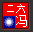
<style>
.page{position:relative;width:33px;height:32px;background:#f20000}
.page>*{position:absolute;margin:0}
.t1{font:10.4px "SimSun";color:#ffffff}
.t2{font:11.7px "SimSun";color:#ffffff}
</style>
<div class="page">
<p class="t1" style="left:7px;top:4px;width:18px;height:9px">二六</p>
<p class="t2" style="left:16px;top:15px;width:11px;height:12px">冯</p>
</div>
